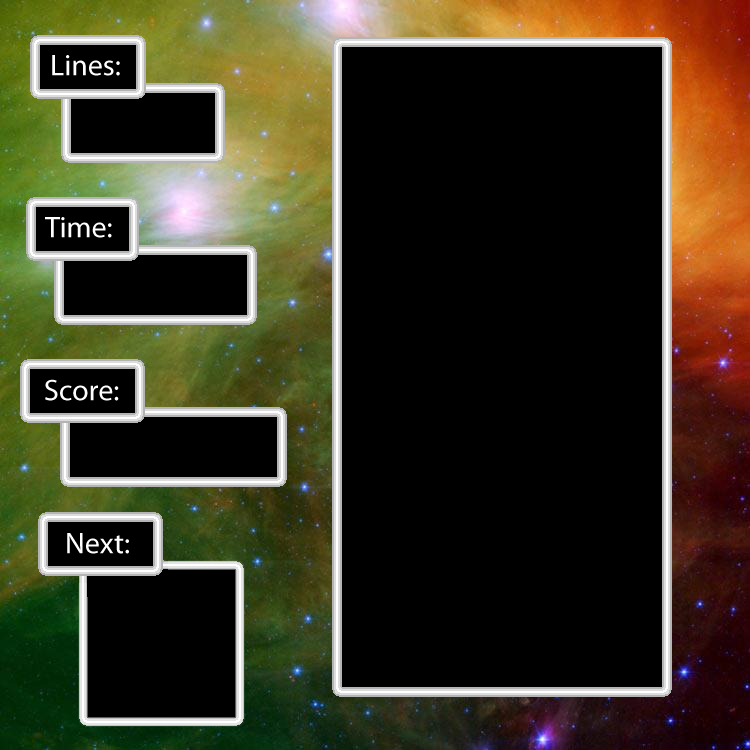
<style>
.page{position:relative;width:750px;height:750px;background:#000000}
.page>*{position:absolute;margin:0}
.t1{font:30px "MyriadPro-Regular";color:#ffffff}
</style>
<div class="page">
<p class="t1" style="left:52px;top:55px;width:68px;height:21px">Lines:</p>
<p class="t1" style="left:45px;top:217px;width:67px;height:21px">Time:</p>
<p class="t1" style="left:45px;top:379px;width:74px;height:22px">Score:</p>
<p class="t1" style="left:67px;top:533px;width:62px;height:21px">Next:</p>
</div>
